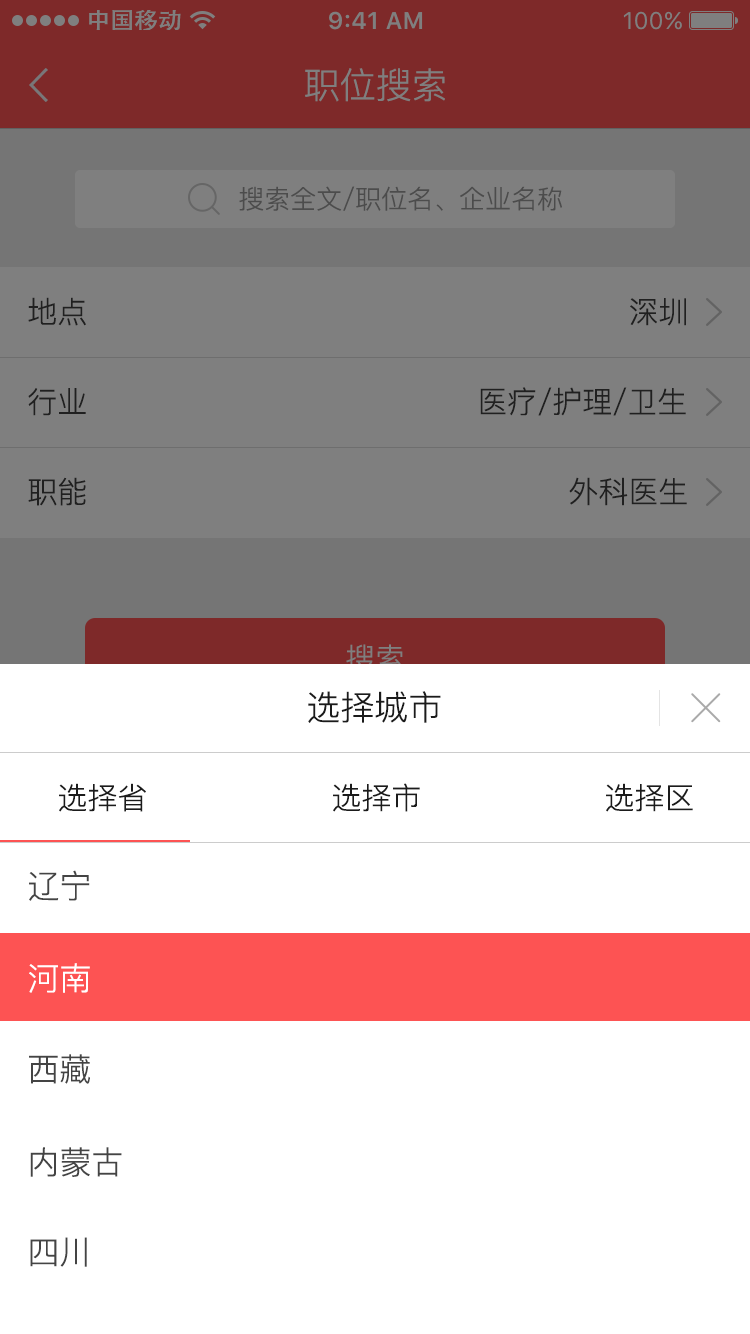
<style>
.page{position:relative;width:750px;height:1334px;background:#ffffff}
.page>*{position:absolute;margin:0}
.t1{font:36px "PingFang-SC-Regular";color:#7f7f7f}
.t2{font:26px "PingFang-SC-Regular";color:#4c4c4c}
.t3{font:30px "PingFang-SC-Regular";color:#202020}
.t4{font:34px "PingFang-SC-Regular";color:#1b1b1b}
.t5{font:30px "PingFang-SC-Regular";color:#1b1b1b}
.t6{font:32px "PingFang-SC-Regular";color:#444444}
.t7{font:32px "PingFang-SC-Regular";color:#ffffff}
</style>
<div class="page">
<p class="t1" style="left:305px;top:68px;width:140px;height:34px">职位搜索</p>
<p class="t2" style="left:239px;top:186px;width:323px;height:25px">搜索全文/职位名、企业名称</p>
<p class="t3" style="left:28px;top:297px;width:58px;height:29px">地点</p>
<p class="t3" style="left:630px;top:298px;width:56px;height:28px">深圳</p>
<p class="t3" style="left:28px;top:388px;width:58px;height:28px">行业</p>
<p class="t3" style="left:480px;top:387px;width:206px;height:29px">医疗/护理/卫生</p>
<p class="t3" style="left:28px;top:477px;width:58px;height:29px">职能</p>
<p class="t3" style="left:569px;top:477px;width:118px;height:29px">外科医生</p>
<p class="t4" style="left:308px;top:691px;width:133px;height:32px">选择城市</p>
<p class="t5" style="left:59px;top:783px;width:87px;height:29px">选择省</p>
<p class="t5" style="left:333px;top:783px;width:87px;height:29px">选择市</p>
<p class="t5" style="left:606px;top:783px;width:87px;height:29px">选择区</p>
<p class="t6" style="left:29px;top:870px;width:61px;height:31px">辽宁</p>
<p class="t7" style="left:29px;top:963px;width:61px;height:30px">河南</p>
<p class="t6" style="left:29px;top:1054px;width:61px;height:30px">西藏</p>
<p class="t6" style="left:30px;top:1147px;width:92px;height:30px">内蒙古</p>
<p class="t6" style="left:30px;top:1237px;width:57px;height:30px">四川</p>
</div>
